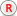
<style>
.page{position:relative;width:17px;height:16px}
.page>*{position:absolute;margin:0}
.t1{font:11px "Menlo-Bold";color:#ed2024}
</style>
<div class="page">
<p class="t1" style="left:6px;top:4px;width:7px;height:8px">R</p>
</div>
